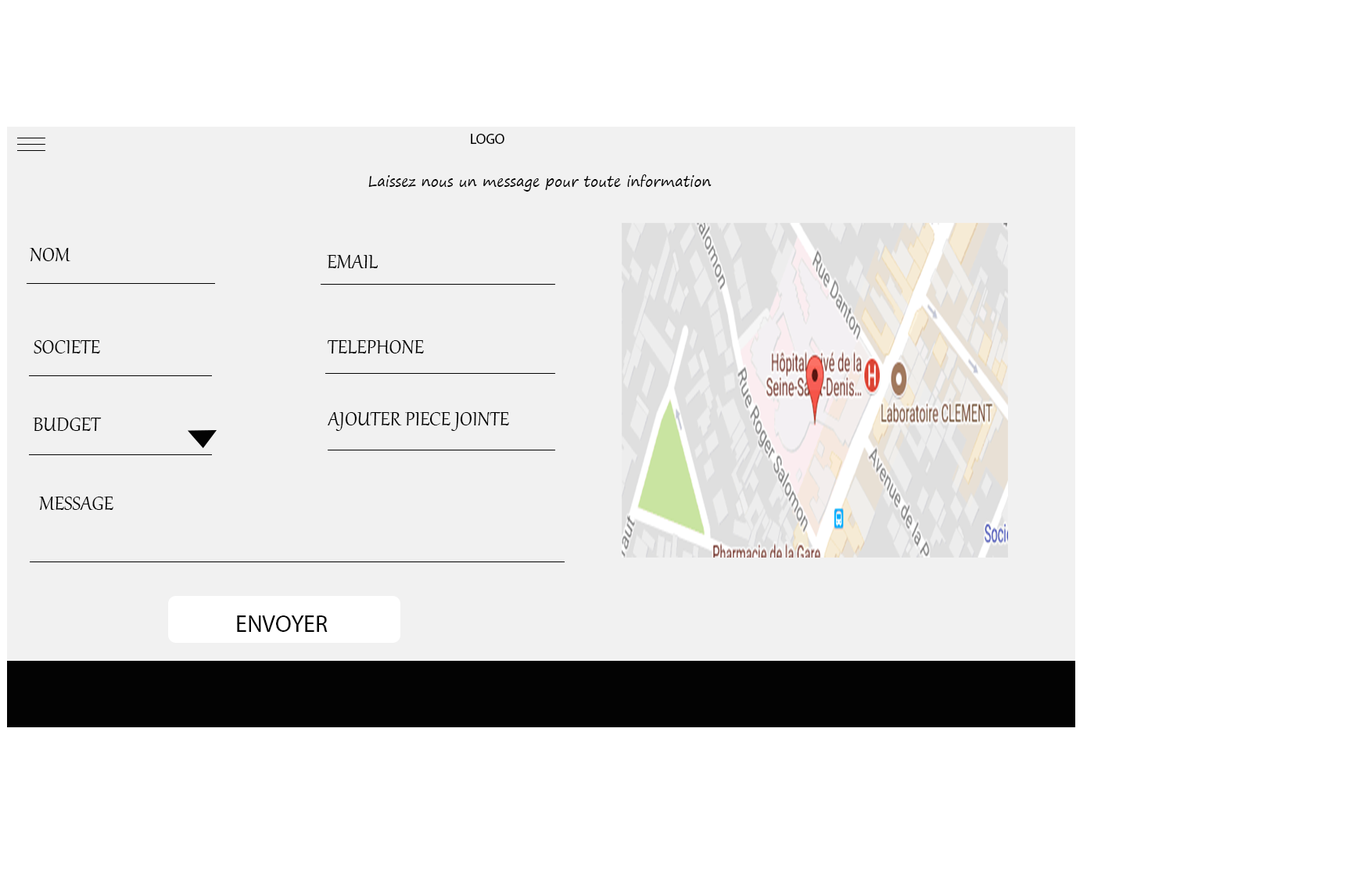
<style>
.page{position:relative;width:1356px;height:879px;background:#ffffff}
.page>*{position:absolute;margin:0}
.t1{font:14.1px "MyriadPro-Regular";color:#040404}
.t2{font:56.3px "MyriadPro-Regular";color:#040404}
.t3{font:14.1px "SegoePrint";color:#040404}
.t4{font:23.5px "Gabriola";color:#030303}
.t5{font:23.5px "MyriadPro-Regular";color:#030303}
</style>
<div class="page">
<p class="t1" style="left:471px;top:134px;width:34px;height:10px"><span class="t2">         </span>LOGO</p>
<p class="t3" style="left:368px;top:174px;width:344px;height:18px">Laissez nous un message pour toute information</p>
<p class="t4" style="left:30px;top:248px;width:40px;height:13px">NOM</p>
<p class="t4" style="left:327px;top:255px;width:51px;height:13px">EMAIL</p>
<p class="t4" style="left:34px;top:340px;width:66px;height:14px">SOCIETE</p>
<p class="t4" style="left:328px;top:340px;width:96px;height:14px">TELEPHONE</p>
<p class="t4" style="left:328px;top:412px;width:181px;height:19px">AJOUTER PIECE JOINTE</p>
<p class="t4" style="left:33px;top:418px;width:69px;height:13px">BUDGET</p>
<p class="t4" style="left:39px;top:497px;width:74px;height:13px">MESSAGE</p>
<p class="t5" style="left:237px;top:616px;width:91px;height:16px">ENVOYER</p>
</div>
